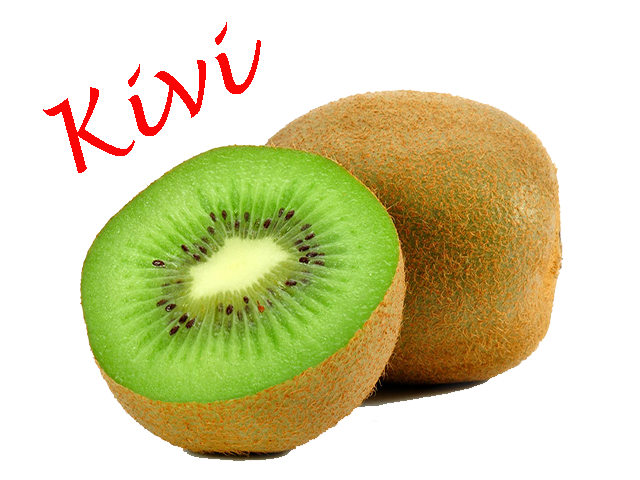
<style>
.page{position:relative;width:640px;height:480px;background:#ffffff}
.page>*{position:absolute;margin:0}
.t1{font:96px "LucidaHandwriting-Italic";color:#fa0606}
</style>
<div class="page">
<p class="t1" style="left:43px;top:22px;width:218px;height:151px;rotate:-26deg">Kivi</p>
</div>
